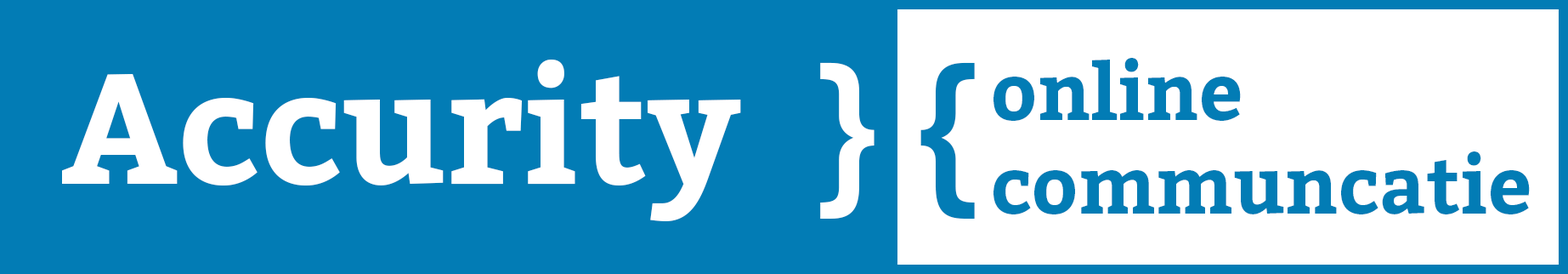
<style>
.page{position:relative;width:1568px;height:274px;background:#027cb5}
.page>*{position:absolute;margin:0}
.t1{font:155.8px "Bitter-Bold";color:#ffffff}
.t2{font:155.8px "Bitter-Bold";color:#027cb5}
.t3{font:77.9px "Bitter-Bold";color:#027cb5}
</style>
<div class="page">
<p class="t1" style="left:62px;top:59px;width:813px;height:162px">Accurity  }</p>
<p class="t2" style="left:920px;top:62px;width:55px;height:156px">{</p>
<p class="t3" style="left:993px;top:58px;width:537px;height:156px">online <br>communcatie</p>
</div>
